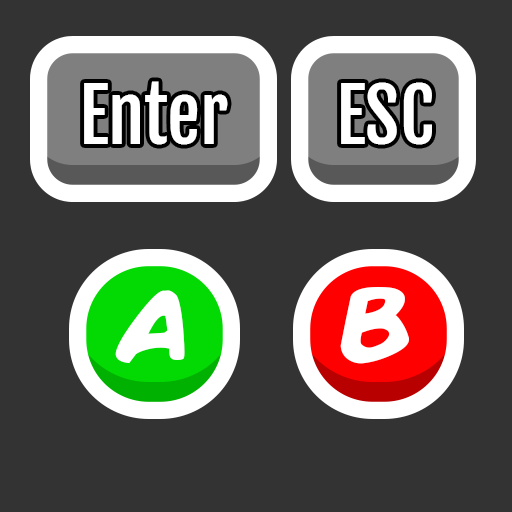
<style>
.page{position:relative;width:512px;height:512px;background:#333333}
.page>*{position:absolute;margin:0}
.t1{font:73.9px "FjallaOne-Regular";color:#ffffff}
.t2{font:74px "FjallaOne-Regular";color:#ffffff}
.t3{font:100.9px "ComicBook-Bold";color:#ffffff}
.t4{font:100.6px "ComicBook-Bold";color:#ffffff}
</style>
<div class="page">
<p class="t1" style="left:84px;top:81px;width:144px;height:64px">Enter</p>
<p class="t2" style="left:341px;top:82px;width:91px;height:63px">ESC</p>
<p class="t3" style="left:115px;top:290px;width:70px;height:74px">A</p>
<p class="t4" style="left:340px;top:287px;width:69px;height:77px">B</p>
</div>
